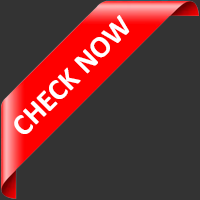
<style>
.page{position:relative;width:200px;height:200px;background:#333333}
.page>*{position:absolute;margin:0}
.t1{font:30px "Calibri-Bold";color:#ffffff}
</style>
<div class="page">
<p class="t1" style="left:14px;top:15px;width:116px;height:119px;rotate:-45deg">CHECK NOW</p>
</div>
